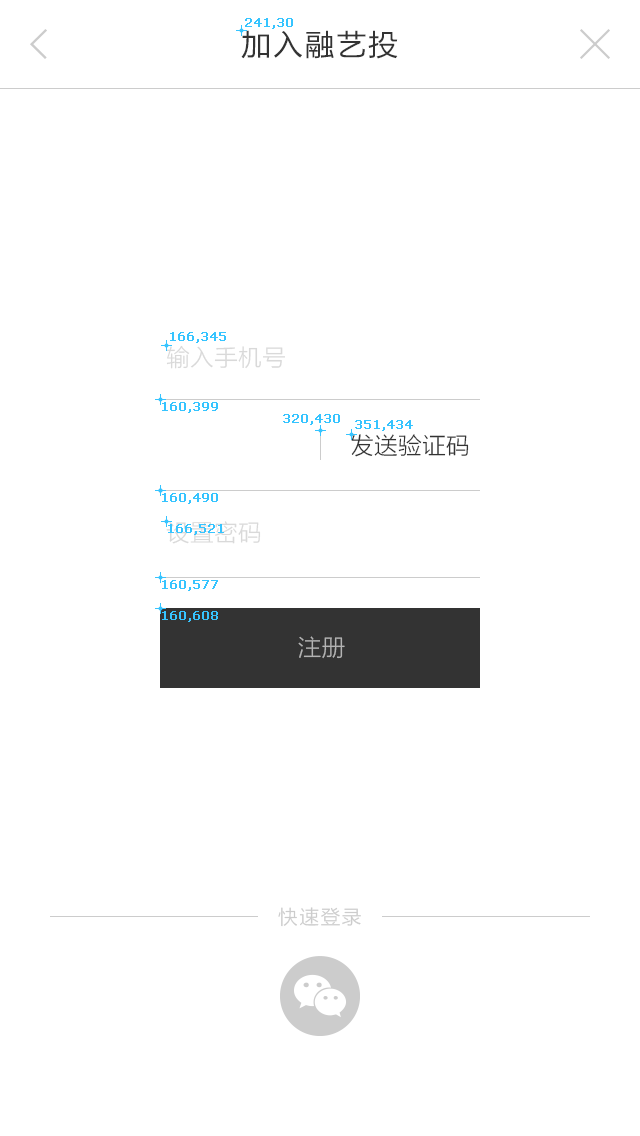
<style>
.page{position:relative;width:640px;height:1136px;background:#ffffff}
.page>*{position:absolute;margin:0}
.t1{font:30px "FZLTHK--GBK1-0";letter-spacing:0.06em;color:#333333}
.t2{font:12px "Verdana";color:#36c4ff;font-weight:bold}
.t3{font:24px "FZLTXIHK--GBK1-0";color:#d9d9d9}
.t4{font:24px "FZLTXIHK--GBK1-0";color:#333333}
.t5{font:24px "FZLTXIHK--GBK1-0";color:#b3b3b3}
.t6{font:20px "FZLTXIHK--GBK1-0";letter-spacing:0.06em;color:#cccccc}
</style>
<div class="page">
<p class="t1" style="left:241px;top:30px;width:157px;height:29px">加入融艺投</p>
<p class="t2" style="left:245px;top:18px;width:48px;height:11px">241,30</p>
<p class="t2" style="left:170px;top:332px;width:56px;height:11px">166,345</p>
<p class="t3" style="left:166px;top:345px;width:119px;height:24px">输入手机号</p>
<p class="t2" style="left:162px;top:402px;width:56px;height:11px">160,399</p>
<p class="t2" style="left:283px;top:414px;width:57px;height:11px">320,430</p>
<p class="t2" style="left:355px;top:420px;width:58px;height:11px">351,434</p>
<p class="t4" style="left:351px;top:434px;width:118px;height:23px">发送验证码</p>
<p class="t2" style="left:162px;top:493px;width:56px;height:11px">160,490</p>
<p class="t2" style="left:162px;top:493px;width:56px;height:11px">160,490</p>
<p class="t3" style="left:166px;top:521px;width:95px;height:23px">设置密码</p>
<p class="t2" style="left:168px;top:524px;width:56px;height:11px">166,521</p>
<p class="t2" style="left:162px;top:580px;width:56px;height:11px">160,577</p>
<p class="t2" style="left:162px;top:611px;width:56px;height:11px">160,608</p>
<p class="t5" style="left:298px;top:636px;width:47px;height:23px">注册</p>
<p class="t6" style="left:278px;top:907px;width:83px;height:20px">快速登录</p>
</div>
